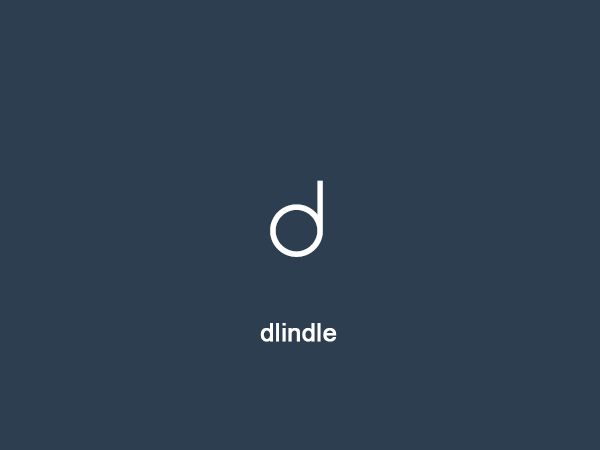
<style>
.page{position:relative;width:600px;height:450px;background:#2c3e50}
.page>*{position:absolute;margin:0}
.t1{font:99.8px "TimeBurner";color:#ffffff}
.t2{font:25px "ArialMT";color:#ffffff;font-weight:bold}
</style>
<div class="page">
<p class="t1" style="left:270px;top:180px;width:53px;height:77px">d</p>
<p class="t2" style="left:260px;top:323px;width:77px;height:19px">dlindle</p>
</div>
